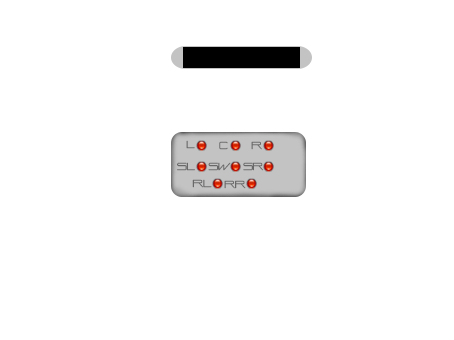
<style>
.page{position:relative;width:454px;height:340px;background:#ffffff}
.page>*{position:absolute;margin:0}
.t1{font:10px "TimeNSpace";color:#686868}
</style>
<div class="page">
<p class="t1" style="left:186px;top:140px;width:9px;height:9px">L</p>
<p class="t1" style="left:219px;top:141px;width:9px;height:9px">C</p>
<p class="t1" style="left:251px;top:141px;width:11px;height:9px">R</p>
<p class="t1" style="left:177px;top:162px;width:18px;height:9px">SL</p>
<p class="t1" style="left:208px;top:162px;width:23px;height:9px">SW</p>
<p class="t1" style="left:243px;top:162px;width:21px;height:9px">SR</p>
<p class="t1" style="left:192px;top:179px;width:20px;height:9px">RL</p>
<p class="t1" style="left:224px;top:180px;width:22px;height:9px">RR</p>
</div>
